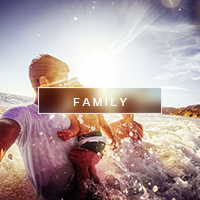
<style>
.page{position:relative;width:200px;height:200px}
.page>*{position:absolute;margin:0}
.t1{font:11.9px "IstokWeb-Regular";letter-spacing:0.2em;color:#ffffff;text-transform:uppercase}
</style>
<div class="page">
<p class="t1" style="left:73px;top:98px;width:54px;height:8px">FAMILY</p>
</div>
